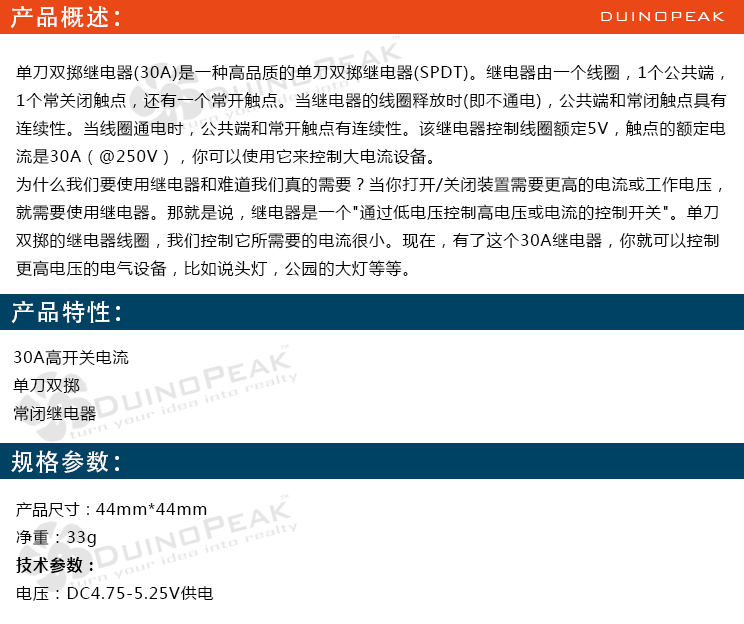
<style>
.page{position:relative;width:744px;height:624px;background:#ffffff}
.page>*{position:absolute;margin:0}
.t1{font:24px "AdobeHeitiStd-Regular";letter-spacing:0.05em;color:#ffffff}
.t2{font:18px "BankGothicBT-Light";letter-spacing:0.05em;color:#ffffff}
.t3{font:16px "MicrosoftYaHei";letter-spacing:0.05em;color:#000000}
.t4{font:16px "MicrosoftYaHei";color:#000000}
.t5{font:16px "MicrosoftYaHei-Bold";letter-spacing:0.05em;color:#000000}
</style>
<div class="page">
<p class="t1" style="left:10px;top:6px;width:109px;height:23px">产品概述：</p>
<p class="t2" style="left:601px;top:12px;width:124px;height:9px">DUINOPEAK</p>
<p class="t3" style="left:16px;top:64px;width:711px;height:213px">单刀双掷继电器(30A)是一种高品质的单刀双掷继电器(SPDT)。继电器由一个线圈，1个公共端，<br>1个常关闭触点，还有一个常开触点。当继电器的线圈释放时(即不通电)，公共端和常闭触点具有<br>连续性。当线圈通电时，公共端和常开触点有连续性。该继电器控制线圈额定5V，触点的额定电<br>流是30A（@250V），你可以使用它来控制大电流设备。<br>为什么我们要使用继电器和难道我们真的需要？当你打开/关闭装置需要更高的电流或工作电压，<br>就需要使用继电器。那就是说，继电器是一个"通过低电压控制高电压或电流的控制开关"。单刀<br>双掷的继电器线圈，我们控制它所需要的电流很小。现在，有了这个30A继电器，你就可以控制<br>更高电压的电气设备，比如说头灯，公园的大灯等等。</p>
<p class="t1" style="left:11px;top:300px;width:109px;height:24px">产品特性：</p>
<p class="t3" style="left:13px;top:349px;width:116px;height:72px">30A高开关电流<br>单刀双掷<br>常闭继电器</p>
<p class="t1" style="left:11px;top:450px;width:108px;height:23px">规格参数：</p>
<p class="t3" style="left:16px;top:502px;width:198px;height:99px"><span class="t4">产品尺寸：</span>44mm*44mm<br>净重：33g<br><span class="t5">技术参数：<br></span>电压：DC4.75-5.25V供电</p>
</div>
